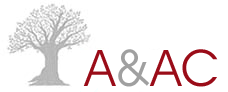
<style>
.page{position:relative;width:228px;height:92px;background:#ffffff}
.page>*{position:absolute;margin:0}
.t1{font:50.7px "AvantGardeITCbyBT-Book";color:#9a0c18}
.t2{font:50.7px "AvantGardeITCbyBT-Book";color:#a0a0a0}
</style>
<div class="page">
<p class="t1" style="left:83px;top:49px;width:135px;height:38px">A<span class="t2">&amp;</span>AC</p>
</div>
